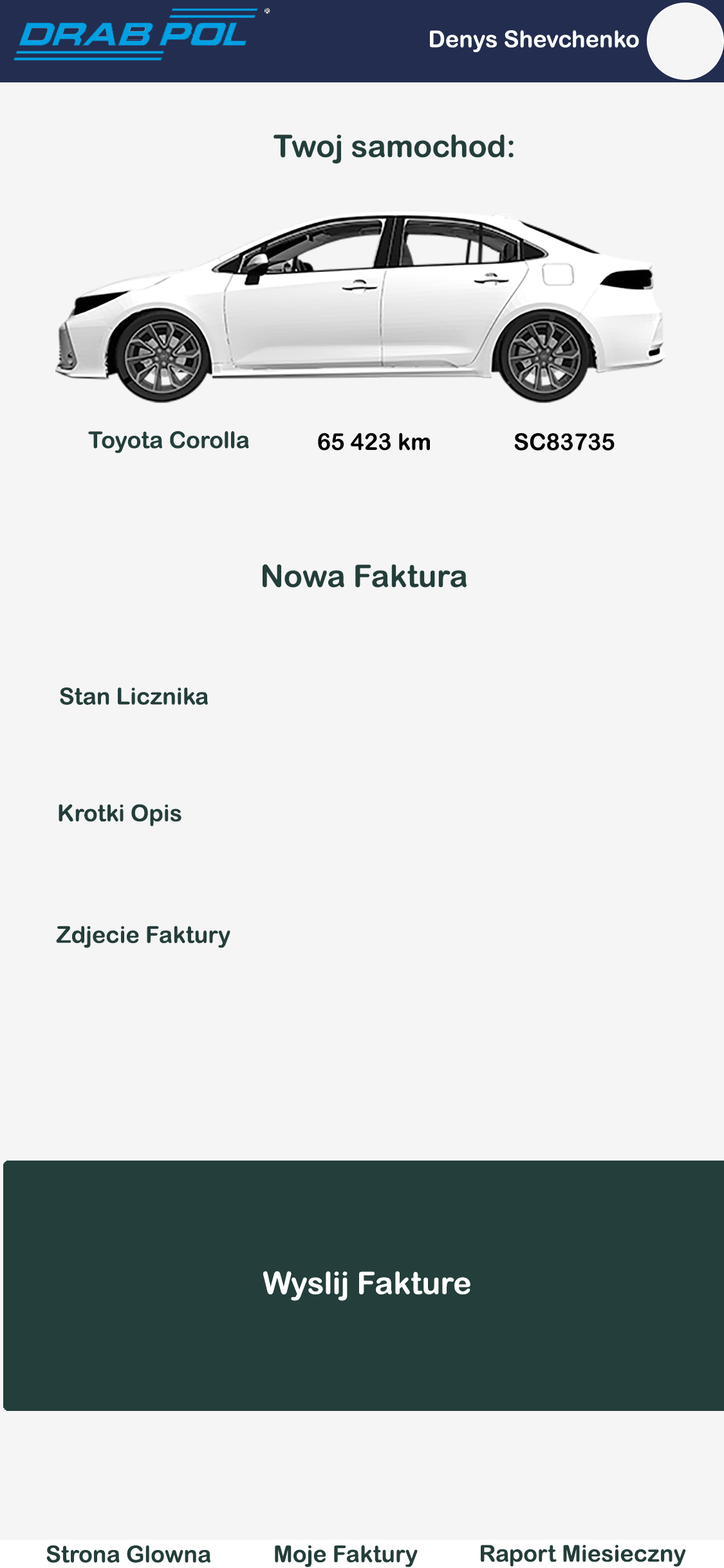
<style>
.page{position:relative;width:724px;height:1568px;background:#f5f5f5}
.page>*{position:absolute;margin:0}
.t1{font:30.9px "ArialRoundedMTBold";color:#233e3b}
.t2{font:23.2px "ArialRoundedMTBold";color:#233e3b}
.t3{font:23.2px "ArialRoundedMTBold";color:#000000}
.t4{font:30.9px "ArialRoundedMTBold";color:#ffffff}
</style>
<div class="page">
<p class="t1" style="left:274px;top:134px;width:240px;height:29px">Twoj samochod:</p>
<p class="t2" style="left:88px;top:431px;width:161px;height:22px">Toyota Corolla</p>
<p class="t3" style="left:318px;top:433px;width:112px;height:18px">65 423 km</p>
<p class="t3" style="left:514px;top:433px;width:101px;height:18px">SC83735</p>
<p class="t1" style="left:263px;top:564px;width:204px;height:24px">Nowa Faktura</p>
<p class="t2" style="left:60px;top:687px;width:148px;height:18px">Stan Licznika</p>
<p class="t2" style="left:59px;top:804px;width:123px;height:22px">Krotki Opis</p>
<p class="t2" style="left:56px;top:926px;width:174px;height:22px">Zdjecie Faktury</p>
<p class="t4" style="left:263px;top:1271px;width:208px;height:30px">Wyslij Fakture</p>
<p class="t2" style="left:46px;top:1545px;width:164px;height:18px">Strona Glowna</p>
<p class="t2" style="left:275px;top:1545px;width:143px;height:22px">Moje Faktury</p>
<p class="t2" style="left:481px;top:1545px;width:205px;height:22px">Raport Miesieczny</p>
</div>
